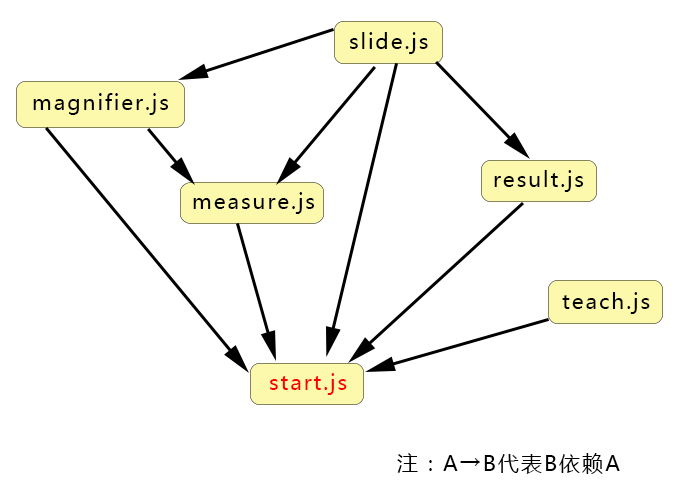
<style>
.page{position:relative;width:680px;height:488px;background:#ffffff}
.page>*{position:absolute;margin:0}
.t1{font:21.3px "MicrosoftYaHei";letter-spacing:0.08em;color:#000000}
.t2{font:21.3px "MicrosoftYaHei";letter-spacing:0.08em;color:#ff0000}
</style>
<div class="page">
<p class="t1" style="left:350px;top:32px;width:78px;height:22px">slide.js</p>
<p class="t1" style="left:33px;top:93px;width:136px;height:22px">magnifier.js</p>
<p class="t1" style="left:494px;top:170px;width:90px;height:22px">result.js</p>
<p class="t1" style="left:193px;top:192px;width:122px;height:22px">measure.js</p>
<p class="t1" style="left:562px;top:292px;width:88px;height:22px">teach.js</p>
<p class="t2" style="left:270px;top:373px;width:77px;height:22px">start.js</p>
<p class="t1" style="left:397px;top:453px;width:223px;height:21px">注：A→B代表B依赖A</p>
</div>
